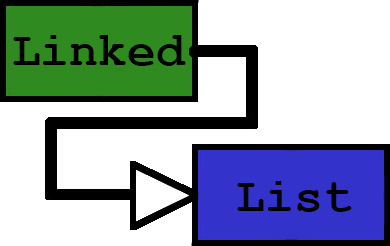
<style>
.page{position:relative;width:390px;height:246px;background:#ffffff}
.page>*{position:absolute;margin:0}
.t1{font:48px "CourierNewPS-BoldMT";color:#000000}
</style>
<div class="page">
<p class="t1" style="left:13px;top:35px;width:173px;height:31px">Linked</p>
<p class="t1" style="left:237px;top:181px;width:115px;height:31px">List</p>
</div>
